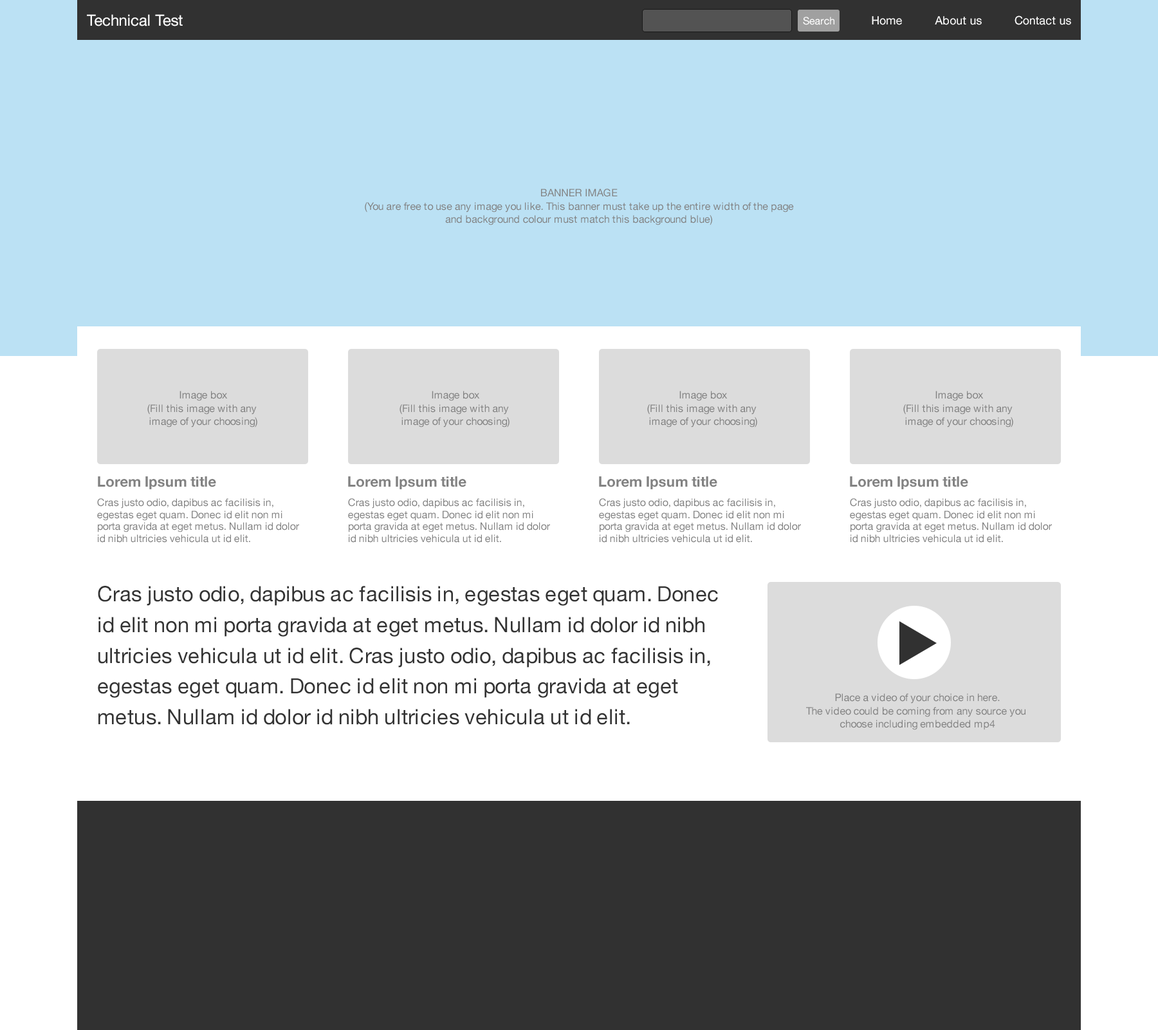
<style>
.page{position:relative;width:1158px;height:1030px;background:#ffffff}
.page>*{position:absolute;margin:0}
.t1{font:15.4px "HelveticaNeue";color:#ffffff}
.t2{font:10.3px "HelveticaNeue";color:#ffffff}
.t3{font:11.6px "HelveticaNeue";color:#ffffff}
.t4{font:10.3px/8.6px "HelveticaNeue";color:#828282}
.t5{font:14.3px "HelveticaNeue-Bold";color:#828282}
.t6{font:10.3px/11.9px "HelveticaNeue";color:#828282}
.t7{font:21.1px/30.8px "HelveticaNeue";color:#333333}
</style>
<div class="page">
<p class="t1" style="left:87px;top:14px;width:96px;height:12px">Technical Test</p>
<p class="t2" style="left:803px;top:17px;width:32px;height:8px">Search</p>
<p class="t3" style="left:872px;top:15px;width:199px;height:10px">Home         About us         Contact us</p>
<p class="t4" style="left:365px;top:189px;width:429px;height:36px;text-align:center">BANNER IMAGE<br>(You are free to use any image you like. This banner must take up the entire width of the page<br>and background colour must match this background blue)</p>
<p class="t4" style="left:147px;top:391px;width:110px;height:36px;text-align:center">Image box<br>(Fill this image with any <br>image of your choosing)</p>
<p class="t4" style="left:400px;top:391px;width:110px;height:36px;text-align:center">Image box<br>(Fill this image with any <br>image of your choosing)</p>
<p class="t4" style="left:647px;top:391px;width:110px;height:36px;text-align:center">Image box<br>(Fill this image with any <br>image of your choosing)</p>
<p class="t4" style="left:903px;top:391px;width:110px;height:36px;text-align:center">Image box<br>(Fill this image with any <br>image of your choosing)</p>
<p class="t5" style="left:98px;top:476px;width:118px;height:13px">Lorem Ipsum title</p>
<p class="t5" style="left:348px;top:476px;width:119px;height:13px">Lorem Ipsum title</p>
<p class="t5" style="left:599px;top:476px;width:118px;height:13px">Lorem Ipsum title</p>
<p class="t5" style="left:850px;top:476px;width:118px;height:13px">Lorem Ipsum title</p>
<p class="t6" style="left:97px;top:498px;width:202px;height:44px">Cras justo odio, dapibus ac facilisis in, egestas eget quam. Donec id elit non mi porta gravida at eget metus. Nullam id dolor id nibh ultricies vehicula ut id elit.</p>
<p class="t6" style="left:348px;top:498px;width:202px;height:44px">Cras justo odio, dapibus ac facilisis in, egestas eget quam. Donec id elit non mi porta gravida at eget metus. Nullam id dolor id nibh ultricies vehicula ut id elit.</p>
<p class="t6" style="left:599px;top:498px;width:202px;height:44px">Cras justo odio, dapibus ac facilisis in, egestas eget quam. Donec id elit non mi porta gravida at eget metus. Nullam id dolor id nibh ultricies vehicula ut id elit.</p>
<p class="t6" style="left:850px;top:498px;width:202px;height:44px">Cras justo odio, dapibus ac facilisis in, egestas eget quam. Donec id elit non mi porta gravida at eget metus. Nullam id dolor id nibh ultricies vehicula ut id elit.</p>
<p class="t7" style="left:98px;top:586px;width:620px;height:139px">Cras justo odio, dapibus ac facilisis in, egestas eget quam. Donec id elit non mi porta gravida at eget metus. Nullam id dolor id nibh ultricies vehicula ut id elit. Cras justo odio, dapibus ac facilisis in, egestas eget quam. Donec id elit non mi porta gravida at eget metus. Nullam id dolor id nibh ultricies vehicula ut id elit.</p>
<p class="t4" style="left:806px;top:693px;width:220px;height:37px;text-align:center">Place a video of your choice in here.<br>The video could be coming from any source you <br>choose including embedded mp4</p>
</div>
